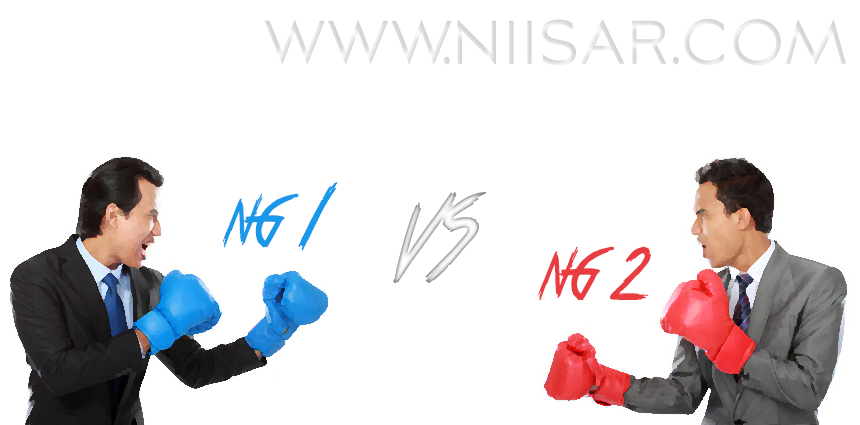
<style>
.page{position:relative;width:860px;height:425px;background:#ffffff}
.page>*{position:absolute;margin:0}
.t1{font:83.9px "AvianoSansLight";color:#dedede;font-weight:bold;scale:0.76 1}
.t2{font:51.1px "TrueLies";color:#1997e9;font-weight:bold;scale:0.76 1}
.t3{font:65.1px "TrueLies";color:#1997e9;font-weight:bold;scale:0.76 1}
.t4{font:87px "TrueLies";font-weight:bold;scale:0.76 1}
.t5{font:51px "TrueLies";color:#e93c40;font-weight:bold;scale:0.76 1}
</style>
<div class="page">
<p class="t1" style="left:265px;top:18px;width:581px;height:48px">www.niisar.com</p>
<p class="t2" style="left:222px;top:182px;width:116px;height:69px">NG <span class="t3">1</span></p>
<p class="t4" style="left:393px;top:192px;width:93px;height:92px">VS</p>
<p class="t5" style="left:538px;top:246px;width:113px;height:55px">NG 2</p>
</div>
